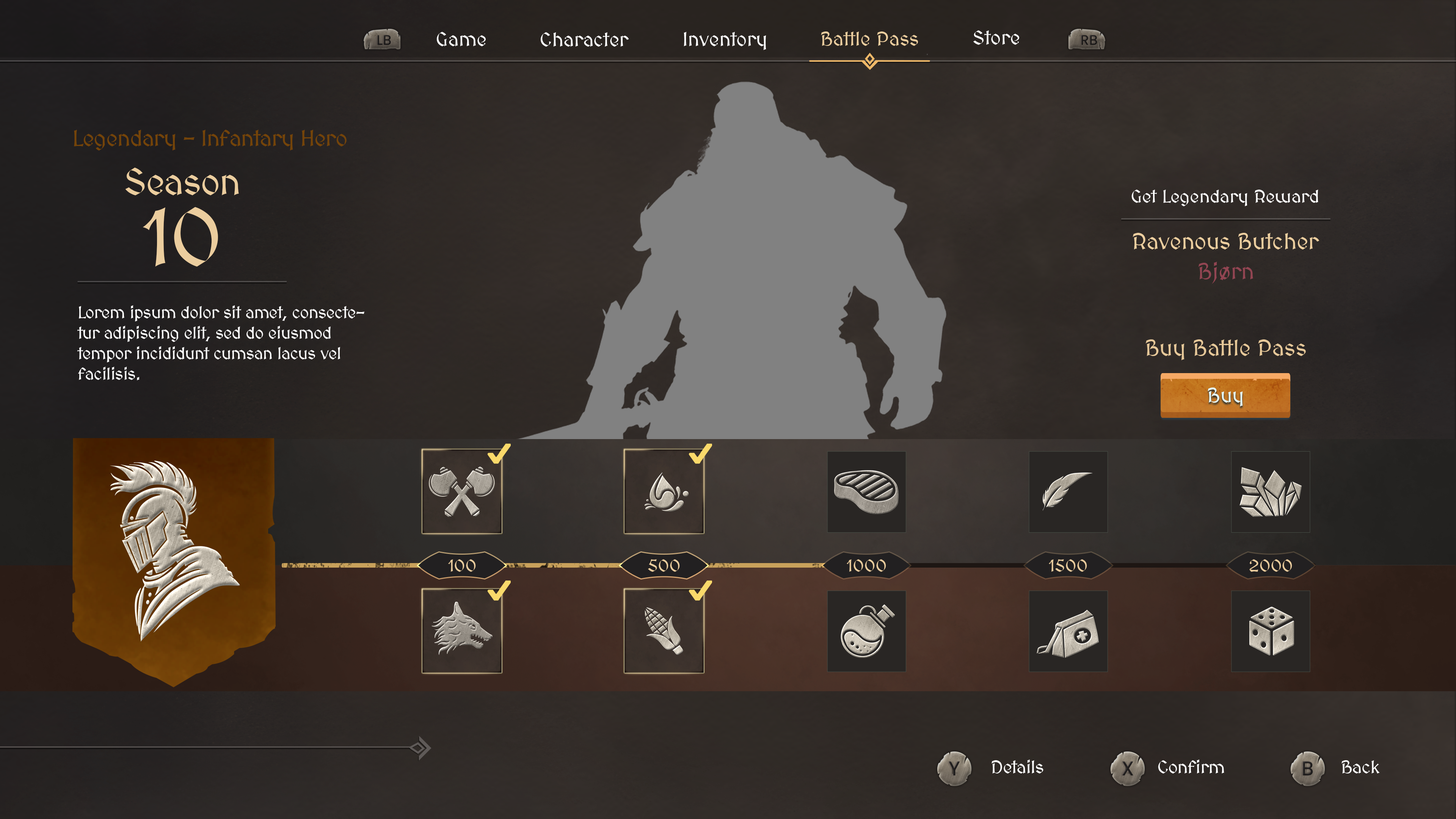
<style>
.page{position:relative;width:1456px;height:819px}
.page>*{position:absolute;margin:0}
.t1{font:19.8px "MedievalSharp";color:#ffffff}
.t2{font:19.8px "MedievalSharp";color:#ebcd9e}
.t3{font:22.7px "MedievalSharp";letter-spacing:-0.02em;color:#744409}
.t4{font:37.1px "MedievalSharp";letter-spacing:-0.02em;color:#ebcd9e}
.t5{font:18.2px "MedievalSharp";color:#ffffff}
.t6{font:80.6px "MedievalSharp";letter-spacing:-0.02em;color:#ebcd9e}
.t7{font:22.7px "MedievalSharp";color:#ecce9f}
.t8{font:22.7px "MedievalSharp";color:#924552}
.t9{font:17.1px "MedievalSharp";letter-spacing:-0.02em;color:#ffffff}
.t10{font:22.7px "MedievalSharp";color:#e6c899}
.t11{font:20.5px "MedievalSharp";color:#e5fbfd}
.t12{font:17.1px "MedievalSharp";color:#ebcd9e}
.t13{font:18.2px "MedievalSharp";letter-spacing:-0.02em;color:#ffffff}
</style>
<div class="page">
<p class="t1" style="left:437px;top:32px;width:49px;height:14px">Game</p>
<p class="t1" style="left:541px;top:32px;width:88px;height:15px">Character</p>
<p class="t1" style="left:684px;top:32px;width:82px;height:18px">Inventory</p>
<p class="t2" style="left:821px;top:31px;width:97px;height:15px">Battle Pass</p>
<p class="t1" style="left:973px;top:30px;width:46px;height:15px">Store</p>
<p class="t3" style="left:74px;top:130px;width:273px;height:21px">Legendary - Infantary Hero</p>
<p class="t4" style="left:125px;top:168px;width:114px;height:27px">Season</p>
<p class="t5" style="left:1131px;top:190px;width:187px;height:16px">Get Legendary Reward</p>
<p class="t6" style="left:143px;top:207px;width:75px;height:60px">10</p>
<p class="t7" style="left:1133px;top:233px;width:186px;height:16px">Ravenous Butcher</p>
<p class="t8" style="left:1198px;top:262px;width:55px;height:22px">Bjørn</p>
<p class="t9" style="left:77px;top:305px;width:288px;height:75px">Lorem ipsum dolor sit amet, consectetur adipiscing elit, sed do eiusmod tempor incididunt cumsan lacus vel facilisis.</p>
<p class="t10" style="left:1145px;top:339px;width:161px;height:21px">Buy Battle Pass</p>
<p class="t11" style="left:1208px;top:388px;width:35px;height:18px">Buy</p>
<p class="t12" style="left:448px;top:559px;width:28px;height:13px">100</p>
<p class="t12" style="left:648px;top:559px;width:32px;height:13px">500</p>
<p class="t12" style="left:846px;top:559px;width:40px;height:13px">1000</p>
<p class="t12" style="left:1048px;top:559px;width:39px;height:13px">1500</p>
<p class="t12" style="left:1249px;top:559px;width:43px;height:13px">2000</p>
<p class="t13" style="left:992px;top:759px;width:51px;height:14px">Details</p>
<p class="t13" style="left:1158px;top:759px;width:66px;height:14px">Confirm</p>
<p class="t13" style="left:1341px;top:760px;width:39px;height:13px">Back</p>
</div>
